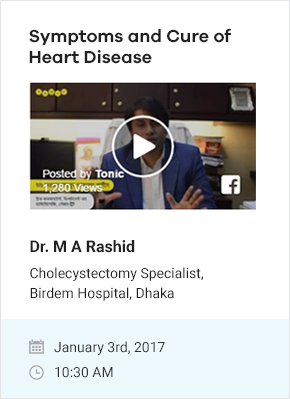
<style>
.page{position:relative;width:290px;height:399px;background:#ffffff}
.page>*{position:absolute;margin:0}
.t1{font:18px "GalanoGrotesque-SemiBold";color:#212121}
.t2{font:16px "Roboto-Bold";color:#212121}
.t3{font:14px/20px "Roboto-Regular";color:#212121}
.t4{font:14px "Roboto-Regular";color:#333333}
</style>
<div class="page">
<p class="t1" style="left:29px;top:28px;width:202px;height:36px">Symptoms and Cure of Heart Disease</p>
<p class="t2" style="left:30px;top:240px;width:105px;height:13px">Dr. M A Rashid</p>
<p class="t3" style="left:30px;top:267px;width:173px;height:34px">Cholecystectomy Specialist, <br>Birdem Hospital, Dhaka</p>
<p class="t4" style="left:54px;top:341px;width:111px;height:14px">January 3rd, 2017</p>
<p class="t4" style="left:55px;top:367px;width:58px;height:11px">10:30 AM</p>
</div>
